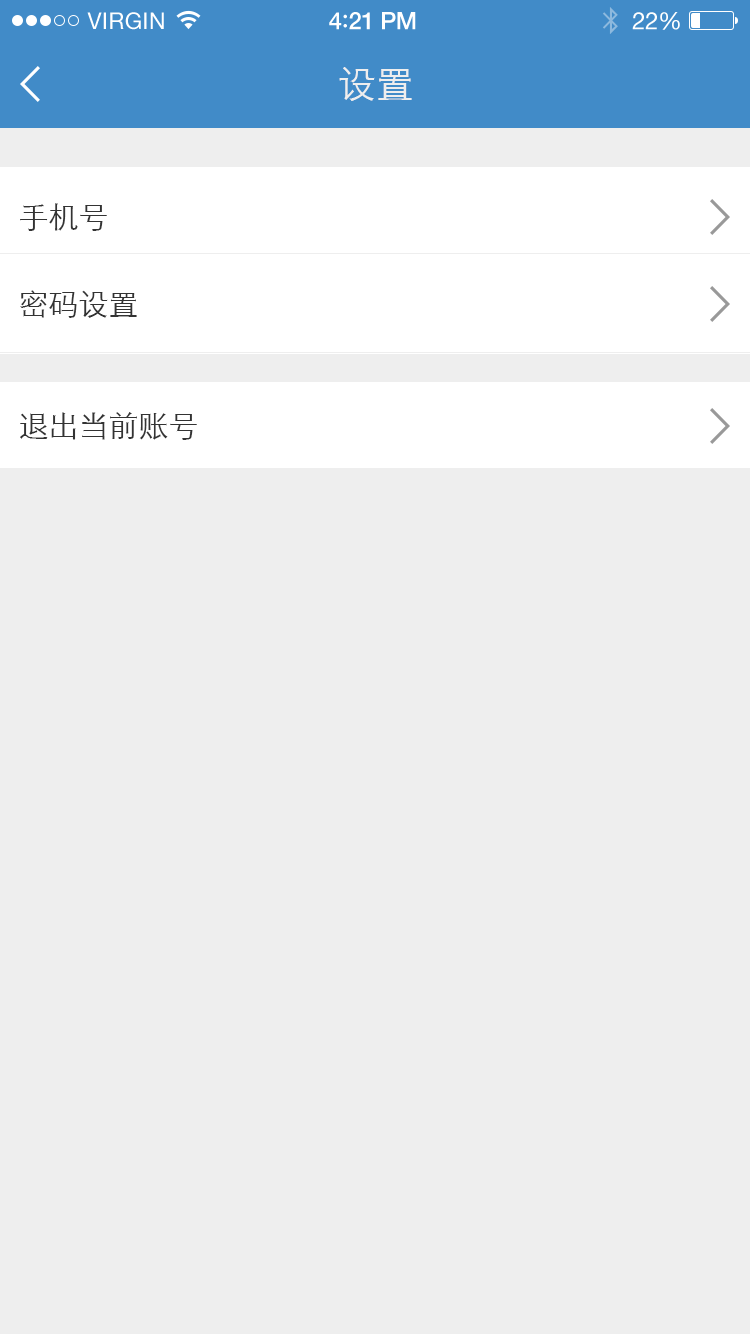
<style>
.page{position:relative;width:750px;height:1334px;background:#eeeeee}
.page>*{position:absolute;margin:0}
.t1{font:23px "HelveticaNeue";letter-spacing:0.02em;color:#ffffff}
.t2{font:24px "HelveticaNeue-Medium";letter-spacing:-0.02em;color:#ffffff}
.t3{font:26px "Avenir-Medium";letter-spacing:-0.02em;color:#ffffff}
.t4{font:24px "HelveticaNeue";letter-spacing:-0.02em;color:#ffffff}
.t5{font:38px "STXihei";color:#eeeeee}
.t6{font:30px "STXihei";color:#333333}
</style>
<div class="page">
<p class="t1" style="left:87px;top:12px;width:77px;height:18px">VIRGIN</p>
<p class="t2" style="left:329px;top:12px;width:87px;height:18px">4<span class="t3">:</span>21 PM</p>
<p class="t4" style="left:632px;top:12px;width:48px;height:18px">22%</p>
<p class="t5" style="left:339px;top:67px;width:73px;height:34px">设置</p>
<p class="t6" style="left:20px;top:203px;width:87px;height:28px">手机号</p>
<p class="t6" style="left:20px;top:290px;width:117px;height:28px">密码设置</p>
<p class="t6" style="left:20px;top:412px;width:177px;height:28px">退出当前账号</p>
</div>
